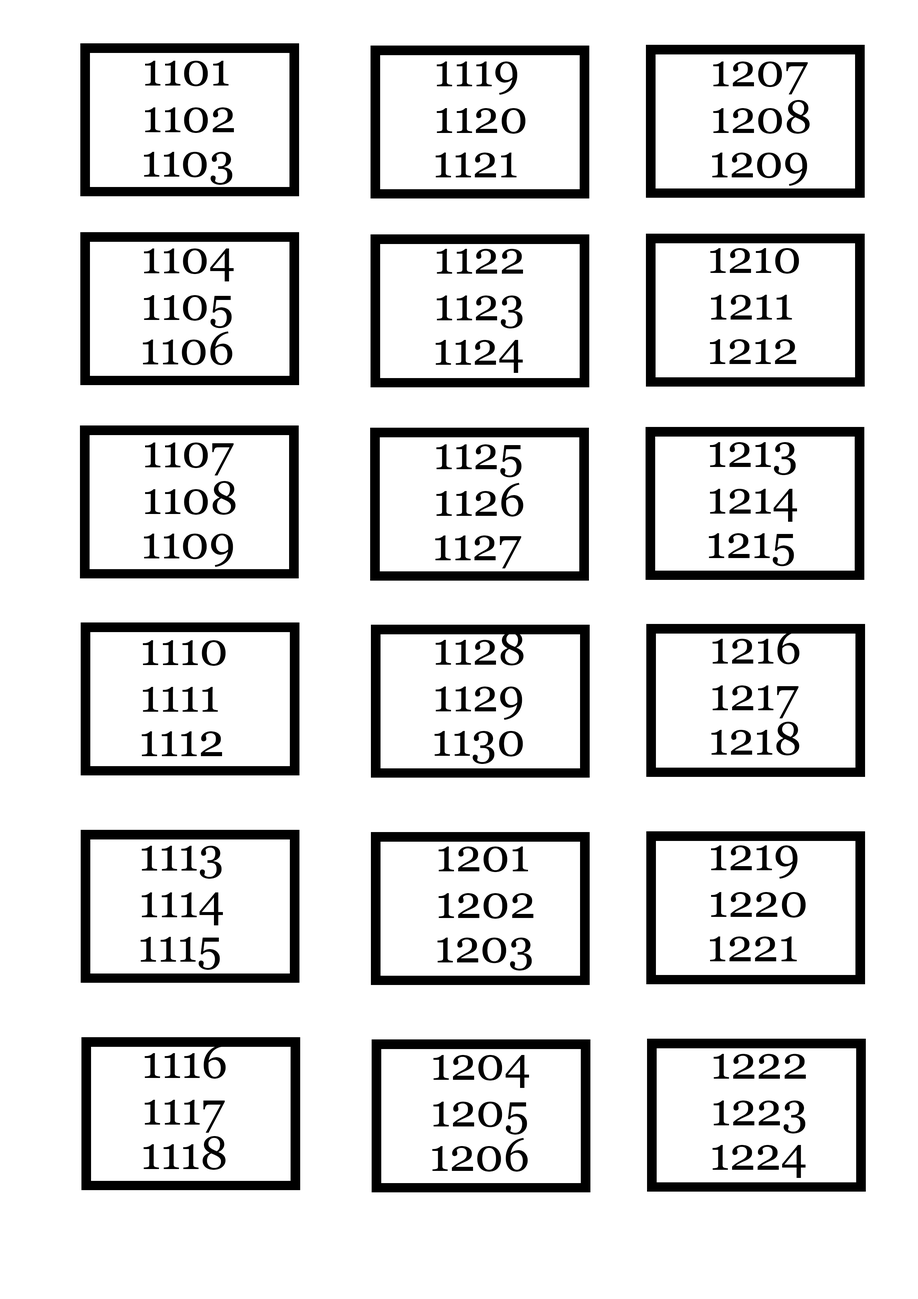
<style>
.page{position:relative;width:918px;height:1299px;background:#ffffff}
.page>*{position:absolute;margin:0}
.t1{font:46.3px "Georgia";color:#000000}
</style>
<div class="page">
<p class="t1" style="left:145px;top:61px;width:84px;height:25px">1101</p>
<p class="t1" style="left:437px;top:61px;width:81px;height:34px">1119</p>
<p class="t1" style="left:713px;top:61px;width:95px;height:33px">1207</p>
<p class="t1" style="left:713px;top:100px;width:97px;height:34px">1208</p>
<p class="t1" style="left:145px;top:107px;width:89px;height:26px">1102</p>
<p class="t1" style="left:437px;top:108px;width:89px;height:26px">1120</p>
<p class="t1" style="left:144px;top:152px;width:88px;height:33px">1103</p>
<p class="t1" style="left:436px;top:153px;width:81px;height:24px">1121</p>
<p class="t1" style="left:712px;top:153px;width:95px;height:33px">1209</p>
<p class="t1" style="left:144px;top:248px;width:90px;height:33px">1104</p>
<p class="t1" style="left:437px;top:249px;width:86px;height:25px">1122</p>
<p class="t1" style="left:710px;top:248px;width:89px;height:26px">1210</p>
<p class="t1" style="left:144px;top:295px;width:88px;height:33px">1105</p>
<p class="t1" style="left:437px;top:295px;width:86px;height:33px">1123</p>
<p class="t1" style="left:711px;top:295px;width:81px;height:25px">1211</p>
<p class="t1" style="left:143px;top:331px;width:89px;height:34px">1106</p>
<p class="t1" style="left:436px;top:340px;width:87px;height:33px">1124</p>
<p class="t1" style="left:710px;top:339px;width:86px;height:25px">1212</p>
<p class="t1" style="left:145px;top:442px;width:89px;height:33px">1107</p>
<p class="t1" style="left:436px;top:444px;width:86px;height:33px">1125</p>
<p class="t1" style="left:710px;top:442px;width:86px;height:33px">1213</p>
<p class="t1" style="left:145px;top:481px;width:91px;height:34px">1108</p>
<p class="t1" style="left:436px;top:483px;width:87px;height:33px">1126</p>
<p class="t1" style="left:710px;top:489px;width:87px;height:33px">1214</p>
<p class="t1" style="left:144px;top:533px;width:89px;height:34px">1109</p>
<p class="t1" style="left:709px;top:533px;width:85px;height:33px">1215</p>
<p class="t1" style="left:435px;top:535px;width:86px;height:33px">1127</p>
<p class="t1" style="left:143px;top:640px;width:83px;height:26px">1110</p>
<p class="t1" style="left:436px;top:632px;width:88px;height:33px">1128</p>
<p class="t1" style="left:713px;top:630px;width:87px;height:34px">1216</p>
<p class="t1" style="left:143px;top:687px;width:75px;height:25px">1111</p>
<p class="t1" style="left:436px;top:686px;width:86px;height:34px">1129</p>
<p class="t1" style="left:713px;top:685px;width:86px;height:33px">1217</p>
<p class="t1" style="left:712px;top:722px;width:88px;height:33px">1218</p>
<p class="t1" style="left:142px;top:731px;width:80px;height:25px">1112</p>
<p class="t1" style="left:435px;top:731px;width:88px;height:33px">1130</p>
<p class="t1" style="left:142px;top:846px;width:80px;height:33px">1113</p>
<p class="t1" style="left:711px;top:845px;width:87px;height:34px">1219</p>
<p class="t1" style="left:439px;top:846px;width:89px;height:26px">1201</p>
<p class="t1" style="left:142px;top:892px;width:81px;height:33px">1114</p>
<p class="t1" style="left:439px;top:893px;width:94px;height:26px">1202</p>
<p class="t1" style="left:711px;top:892px;width:95px;height:25px">1220</p>
<p class="t1" style="left:141px;top:937px;width:79px;height:33px">1115</p>
<p class="t1" style="left:438px;top:937px;width:94px;height:33px">1203</p>
<p class="t1" style="left:710px;top:936px;width:87px;height:25px">1221</p>
<p class="t1" style="left:145px;top:1045px;width:81px;height:33px">1116</p>
<p class="t1" style="left:434px;top:1055px;width:95px;height:33px">1204</p>
<p class="t1" style="left:714px;top:1054px;width:92px;height:24px">1222</p>
<p class="t1" style="left:145px;top:1100px;width:80px;height:33px">1117</p>
<p class="t1" style="left:434px;top:1101px;width:93px;height:33px">1205</p>
<p class="t1" style="left:714px;top:1100px;width:92px;height:33px">1223</p>
<p class="t1" style="left:144px;top:1136px;width:82px;height:34px">1118</p>
<p class="t1" style="left:432px;top:1138px;width:96px;height:33px">1206</p>
<p class="t1" style="left:713px;top:1145px;width:93px;height:33px">1224</p>
</div>
